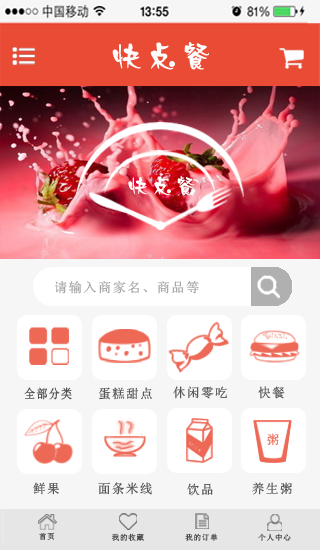
<style>
.page{position:relative;width:320px;height:550px;background:#f6f6f6}
.page>*{position:absolute;margin:0}
.t1{font:31.2px "Pop3EG-Extra-GB";letter-spacing:0.1em;color:#fefdfd}
.t2{font:21.5px "Pop3EG-Extra-GB";letter-spacing:0.1em;color:#ffffff}
.t3{font:13.3px "SimSun";letter-spacing:0.1em;color:#a1a1a1}
.t4{font:12.7px "SimSun";letter-spacing:0.1em;color:#4c4c4c;scale:0.87 1}
.t5{font:12.8px "SimSun";letter-spacing:0.1em;color:#4c4c4c}
.t6{font:12.8px "SimSun";letter-spacing:0.1em;color:#ed6855}
.t7{font:7.5px "SimSun";letter-spacing:0.1em;color:#4c4c4c}
</style>
<div class="page">
<p class="t1" style="left:112px;top:42px;width:97px;height:28px">快点餐</p>
<p class="t2" style="left:128px;top:176px;width:67px;height:19px">快点餐</p>
<p class="t3" style="left:54px;top:281px;width:145px;height:13px">请输入商家名、商品等</p>
<p class="t4" style="left:24px;top:387px;width:48px;height:13px">全部分类</p>
<p class="t5" style="left:99px;top:387px;width:53px;height:13px">蛋糕甜点</p>
<p class="t5" style="left:173px;top:386px;width:54px;height:13px">休闲零吃</p>
<p class="t5" style="left:258px;top:386px;width:27px;height:13px">快餐</p>
<p class="t6" style="left:267px;top:433px;width:12px;height:13px">粥</p>
<p class="t5" style="left:33px;top:482px;width:26px;height:13px">鲜果</p>
<p class="t5" style="left:98px;top:482px;width:54px;height:13px">面条米线</p>
<p class="t5" style="left:187px;top:483px;width:26px;height:13px">饮品</p>
<p class="t5" style="left:252px;top:482px;width:40px;height:13px">养生粥</p>
<p class="t7" style="left:39px;top:532px;width:16px;height:8px">首页</p>
<p class="t7" style="left:112px;top:533px;width:32px;height:8px">我的收藏</p>
<p class="t7" style="left:185px;top:533px;width:33px;height:8px">我的订单</p>
<p class="t7" style="left:258px;top:533px;width:33px;height:8px">个人中心</p>
</div>
